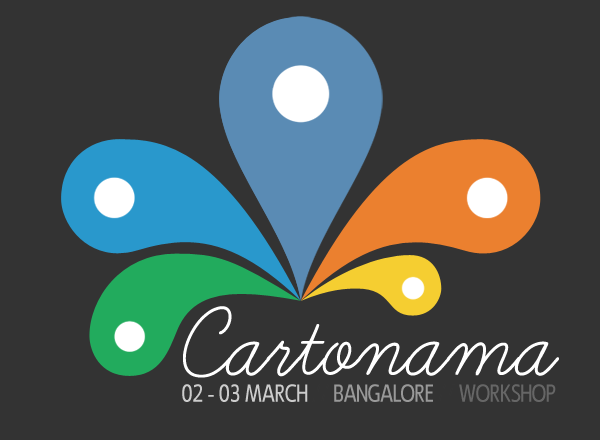
<style>
.page{position:relative;width:600px;height:440px;background:#333333}
.page>*{position:absolute;margin:0}
.t1{font:119.1px "LearningCurvePro";color:#ffffff}
.t2{font:24.5px "LigurinoCondensed";color:#cccccc;font-variant:small-caps}
.t3{font:24.5px "LigurinoCondensed";color:#333333;font-variant:small-caps}
.t4{font:24.5px "LigurinoCondensed";color:#999999;font-variant:small-caps}
.t5{font:24.5px "LigurinoCondensed";color:#666666;font-variant:small-caps}
</style>
<div class="page">
<p class="t1" style="left:183px;top:306px;width:376px;height:72px">Cartonama</p>
<p class="t2" style="left:182px;top:384px;width:374px;height:18px">02 - 03 MARCH <span class="t3">//</span><span class="t4"> BANGALORE </span><span class="t3">//</span><span class="t5"> WORKSHOP</span></p>
</div>
